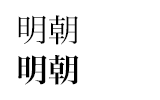
<style>
.page{position:relative;width:160px;height:100px;background:#ffffff}
.page>*{position:absolute;margin:0}
.t1{font:32px "HiraMinProN-W3";color:#000000}
.t2{font:32px "HiraMinProN-W6";color:#000000}
</style>
<div class="page">
<p class="t1" style="left:18px;top:15px;width:60px;height:30px">明朝</p>
<p class="t2" style="left:18px;top:55px;width:61px;height:30px">明朝</p>
</div>
